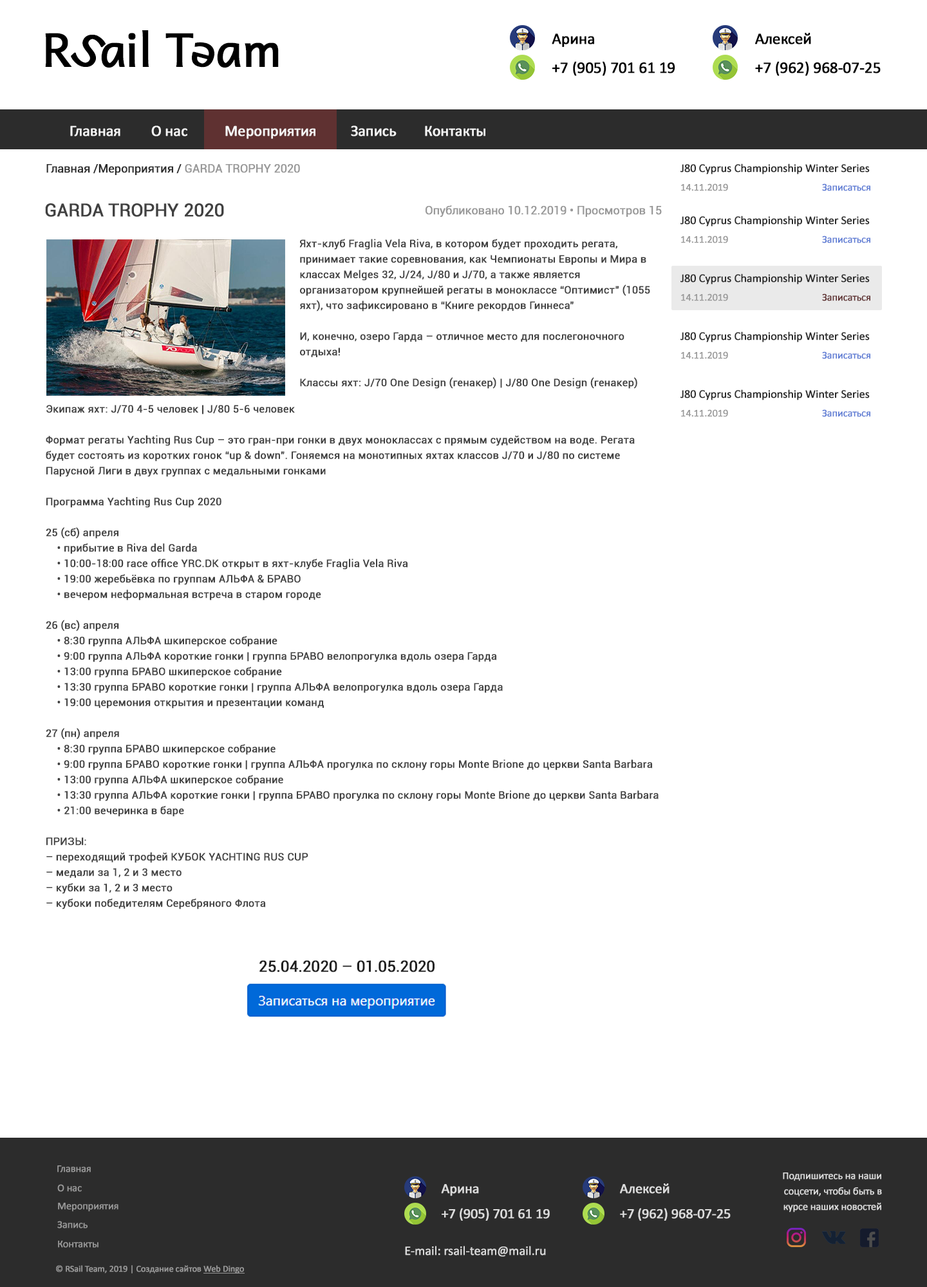
<style>
.page{position:relative;width:927px;height:1287px;background:#ffffff}
.page>*{position:absolute;margin:0}
.t1{font:46.2px "Andika";letter-spacing:-0.02em;color:#000000;font-weight:bold}
.t2{font:46.3px "Andika";letter-spacing:-0.02em;color:#000000;font-weight:bold}
.t3{font:16.1px "Calibri";letter-spacing:-0.02em;color:#000000;font-weight:bold}
.t4{font:15.4px "Calibri";letter-spacing:-0.02em;color:#f6f6f6;font-weight:bold}
.t5{font:11.6px "Roboto-Regular";letter-spacing:-0.02em;color:#2c2c2c;font-weight:bold}
.t6{font:11.6px "Roboto-Regular";letter-spacing:-0.02em;color:#999999;font-weight:bold}
.t7{font:11.6px "Calibri";letter-spacing:-0.02em;color:#2b2b2b;font-weight:bold}
.t8{font:10.3px "Calibri";letter-spacing:-0.02em;color:#999999;font-weight:bold}
.t9{font:10.3px "Calibri";letter-spacing:-0.02em;color:#5f7dd4;font-weight:bold}
.t10{font:18px "Roboto-Regular";letter-spacing:-0.02em;color:#414141;font-weight:bold}
.t11{font:10.3px/15.4px "Roboto-Regular";letter-spacing:0.005em;color:#414141;font-weight:bold}
.t12{font:10.3px "Calibri";letter-spacing:-0.02em;color:#5f3131;font-weight:bold}
.t13{font:15.4px "Roboto-Regular";letter-spacing:-0.02em;color:#202020;font-weight:bold}
.t14{font:10.3px/15.4px "Calibri";letter-spacing:-0.02em;color:#dcdcdc;font-weight:bold}
.t15{font:14.2px "Calibri";letter-spacing:-0.02em;color:#dcdcdc;font-weight:bold}
.t16{font:12.9px "Calibri";letter-spacing:-0.02em;color:#dcdcdc;font-weight:bold}
.t17{font:9px "Calibri";letter-spacing:-0.02em;color:#999999;font-weight:bold}
</style>
<div class="page">
<p class="t1" style="left:45px;top:33px;width:26px;height:34px">R</p>
<p class="t2" style="left:71px;top:35px;width:35px;height:32px;rotate:34deg">S</p>
<p class="t1" style="left:128px;top:33px;width:8px;height:34px">i</p>
<p class="t1" style="left:142px;top:30px;width:7px;height:37px">l</p>
<p class="t1" style="left:165px;top:33px;width:29px;height:34px">T</p>
<p class="t1" style="left:192px;top:42px;width:22px;height:26px;rotate:-165deg">e</p>
<p class="t3" style="left:551px;top:33px;width:43px;height:14px">Арина</p>
<p class="t3" style="left:755px;top:33px;width:56px;height:11px">Алексей</p>
<p class="t1" style="left:101px;top:42px;width:24px;height:26px">a</p>
<p class="t1" style="left:217px;top:42px;width:24px;height:26px">a</p>
<p class="t1" style="left:245px;top:42px;width:34px;height:25px">m</p>
<p class="t3" style="left:551px;top:61px;width:124px;height:15px">+7 (905) 701 61 19</p>
<p class="t3" style="left:755px;top:61px;width:125px;height:15px">+7 (962) 968-07-25</p>
<p class="t4" style="left:70px;top:125px;width:50px;height:11px">Главная</p>
<p class="t4" style="left:151px;top:125px;width:36px;height:11px">О нас</p>
<p class="t4" style="left:225px;top:125px;width:90px;height:14px">Мероприятия</p>
<p class="t4" style="left:351px;top:125px;width:45px;height:11px">Запись</p>
<p class="t4" style="left:425px;top:125px;width:60px;height:11px">Контакты</p>
<p class="t5" style="left:46px;top:164px;width:254px;height:11px">Главная /Мероприятия / <span class="t6">GARDA TROPHY 2020</span></p>
<p class="t7" style="left:680px;top:163px;width:189px;height:11px">J80 Cyprus Championship Winter Series</p>
<p class="t8" style="left:681px;top:183px;width:47px;height:8px">14.11.2019</p>
<p class="t9" style="left:822px;top:183px;width:48px;height:8px">Записаться</p>
<p class="t10" style="left:45px;top:203px;width:179px;height:14px">GARDA TROPHY 2020</p>
<p class="t6" style="left:425px;top:205px;width:236px;height:12px">Опубликовано 10.12.2019 • Просмотров 15</p>
<p class="t7" style="left:680px;top:216px;width:189px;height:10px">J80 Cyprus Championship Winter Series</p>
<p class="t11" style="left:299px;top:239px;width:351px;height:150px">Яхт-клуб Fraglia Vela Riva, в котором будет проходить регата, принимает такие соревнования, как Чемпионаты Европы и Мира в классах Melges 32, J/24, J/80 и J/70, а также является организатором крупнейшей регаты в моноклассе “Оптимист” (1055 яхт), что зафиксировано в “Книге рекордов Гиннеса”<br><br>И, конечно, озеро Гарда – отличное место для послегоночного отдыха!<br><br>Классы яхт: J/70 One Design (генакер) | J/80 One Design (генакер)</p>
<p class="t8" style="left:681px;top:236px;width:47px;height:7px">14.11.2019</p>
<p class="t9" style="left:822px;top:236px;width:48px;height:7px">Записаться</p>
<p class="t7" style="left:680px;top:273px;width:189px;height:11px">J80 Cyprus Championship Winter Series</p>
<p class="t8" style="left:681px;top:293px;width:47px;height:8px">14.11.2019</p>
<p class="t12" style="left:822px;top:293px;width:48px;height:8px">Записаться</p>
<p class="t7" style="left:680px;top:331px;width:189px;height:11px">J80 Cyprus Championship Winter Series</p>
<p class="t8" style="left:681px;top:351px;width:47px;height:8px">14.11.2019</p>
<p class="t9" style="left:822px;top:351px;width:48px;height:8px">Записаться</p>
<p class="t7" style="left:680px;top:389px;width:189px;height:11px">J80 Cyprus Championship Winter Series</p>
<p class="t11" style="left:46px;top:405px;width:612px;height:504px">Экипаж яхт: J/70 4-5 человек | J/80 5-6 человек<br><br>Формат регаты Yachting Rus Cup – это гран-при гонки в двух моноклассах с прямым судейством на воде. Регата будет состоять из коротких гонок “up &amp; down”. Гоняемся на монотипных яхтах классов J/70 и J/80 по системе Парусной Лиги в двух группах c медальными гонками<br><br>Программа Yachting Rus Cup 2020<br><br>25 (сб) апреля<br>    • прибытие в Riva del Garda<br>    • 10:00-18:00 race office YRC.DK открыт в яхт-клубе Fraglia Vela Riva<br>    • 19:00 жеребьёвка по группам АЛЬФА &amp; БРАВО<br>    • вечером неформальная встреча в старом городе<br><br>26 (вс) апреля<br>    • 8:30 группа АЛЬФА шкиперское собрание<br>    • 9:00 группа АЛЬФА короткие гонки | группа БРАВО велопрогулка вдоль озера Гарда<br>    • 13:00 группа БРАВО шкиперское собрание<br>    • 13:30 группа БРАВО короткие гонки | группа АЛЬФА велопрогулка вдоль озера Гарда<br>    • 19:00 церемония открытия и презентации команд<br><br>27 (пн) апреля<br>    • 8:30 группа БРАВО шкиперское собрание<br>    • 9:00 группа БРАВО короткие гонки | группа АЛЬФА прогулка по склону горы Monte Brione до церкви Santa Barbara<br>    • 13:00 группа АЛЬФА шкиперское собрание<br>    • 13:30 группа АЛЬФА короткие гонки | группа БРАВО прогулка по склону горы Monte Brione до церкви Santa Barbara<br>    • 21:00 вечеринка в баре<br><br>ПРИЗЫ:<br>– переходящий трофей КУБОК YACHTING RUS CUP<br>– медали за 1, 2 и 3 место<br>– кубки за 1, 2 и 3 место<br>– кубоки победителям Серебряного Флота</p>
<p class="t8" style="left:681px;top:409px;width:47px;height:8px">14.11.2019</p>
<p class="t9" style="left:822px;top:409px;width:48px;height:8px">Записаться</p>
<p class="t13" style="left:259px;top:960px;width:175px;height:12px">25.04.2020 – 01.05.2020</p>
<p class="t8" style="left:57px;top:1165px;width:34px;height:7px">Главная</p>
<p class="t14" style="left:782px;top:1172px;width:100px;height:40px;text-align:right">Подпишитесь на наши<br>соцсети, чтобы быть в<br>курсе наших новостей</p>
<p class="t8" style="left:57px;top:1184px;width:25px;height:8px">О нас</p>
<p class="t15" style="left:441px;top:1184px;width:38px;height:12px">Арина</p>
<p class="t15" style="left:620px;top:1183px;width:49px;height:11px">Алексей</p>
<p class="t8" style="left:58px;top:1203px;width:60px;height:9px">Мероприятия</p>
<p class="t15" style="left:441px;top:1208px;width:109px;height:13px">+7 (905) 701 61 19</p>
<p class="t15" style="left:620px;top:1208px;width:110px;height:13px">+7 (962) 968-07-25</p>
<p class="t8" style="left:57px;top:1221px;width:31px;height:7px">Запись</p>
<p class="t8" style="left:58px;top:1241px;width:40px;height:7px">Контакты</p>
<p class="t16" style="left:405px;top:1246px;width:141px;height:11px">E-mail: rsail-team@mail.ru</p>
<p class="t17" style="left:56px;top:1265px;width:188px;height:8px">© RSail Team, 2019 | Создание сайтов Web Dingo</p>
</div>
